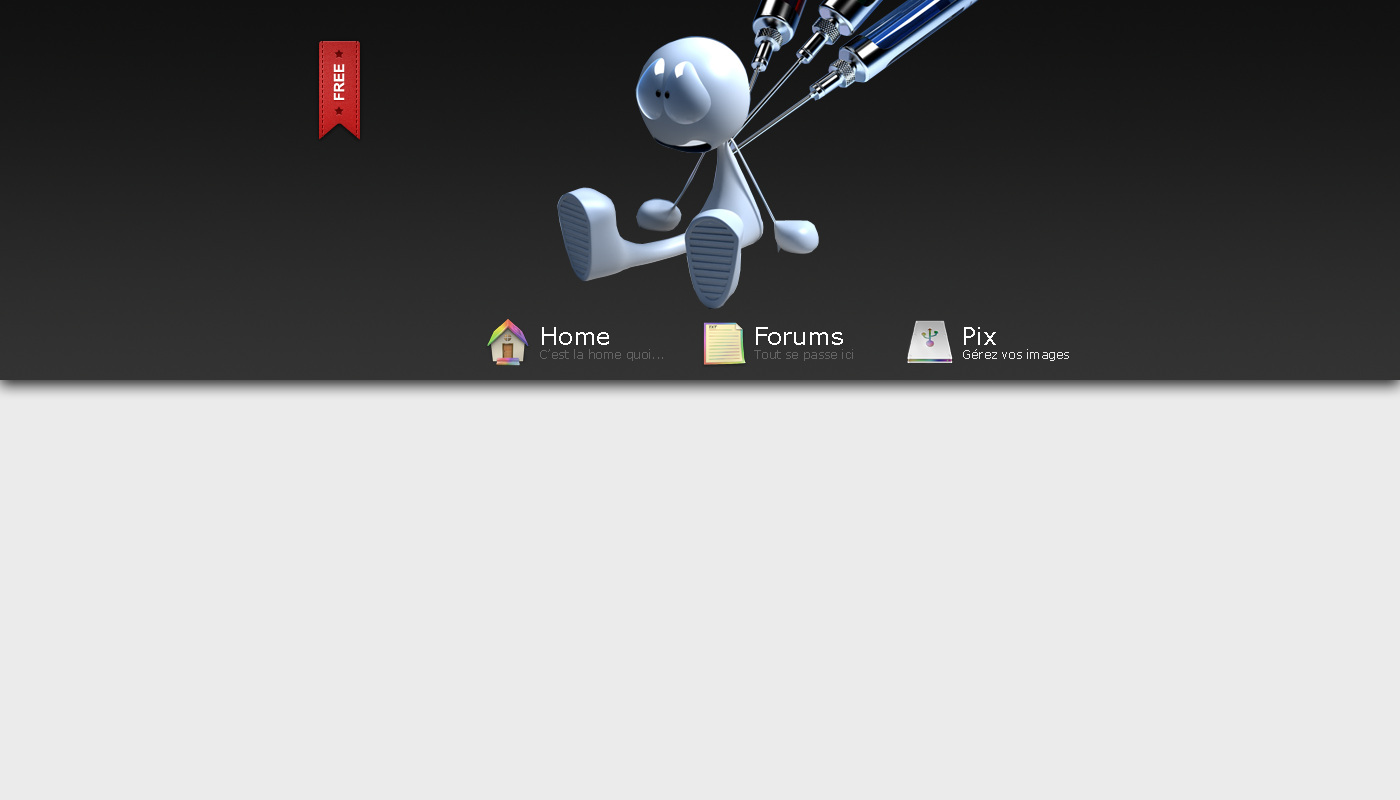
<style>
.page{position:relative;width:1400px;height:800px;background:#ebebeb}
.page>*{position:absolute;margin:0}
.t1{font:14px "Arial-BoldMT";color:#ffffff;text-transform:uppercase}
.t2{font:24px "Verdana";color:#ffffff}
.t3{font:12px "Verdana";color:#656464}
.t4{font:12px "Verdana";color:#ebebeb}
</style>
<div class="page">
<p class="t1" style="left:333px;top:64px;width:12px;height:36px;rotate:-90deg">free</p>
<p class="t2" style="left:542px;top:327px;width:67px;height:18px">Home</p>
<p class="t2" style="left:756px;top:327px;width:87px;height:18px">Forums</p>
<p class="t2" style="left:964px;top:327px;width:32px;height:18px">Pix</p>
<p class="t3" style="left:540px;top:349px;width:123px;height:12px">C’est la home quoi...</p>
<p class="t3" style="left:754px;top:349px;width:99px;height:12px">Tout se passe ici</p>
<p class="t4" style="left:963px;top:349px;width:106px;height:12px">Gérez vos images</p>
</div>
